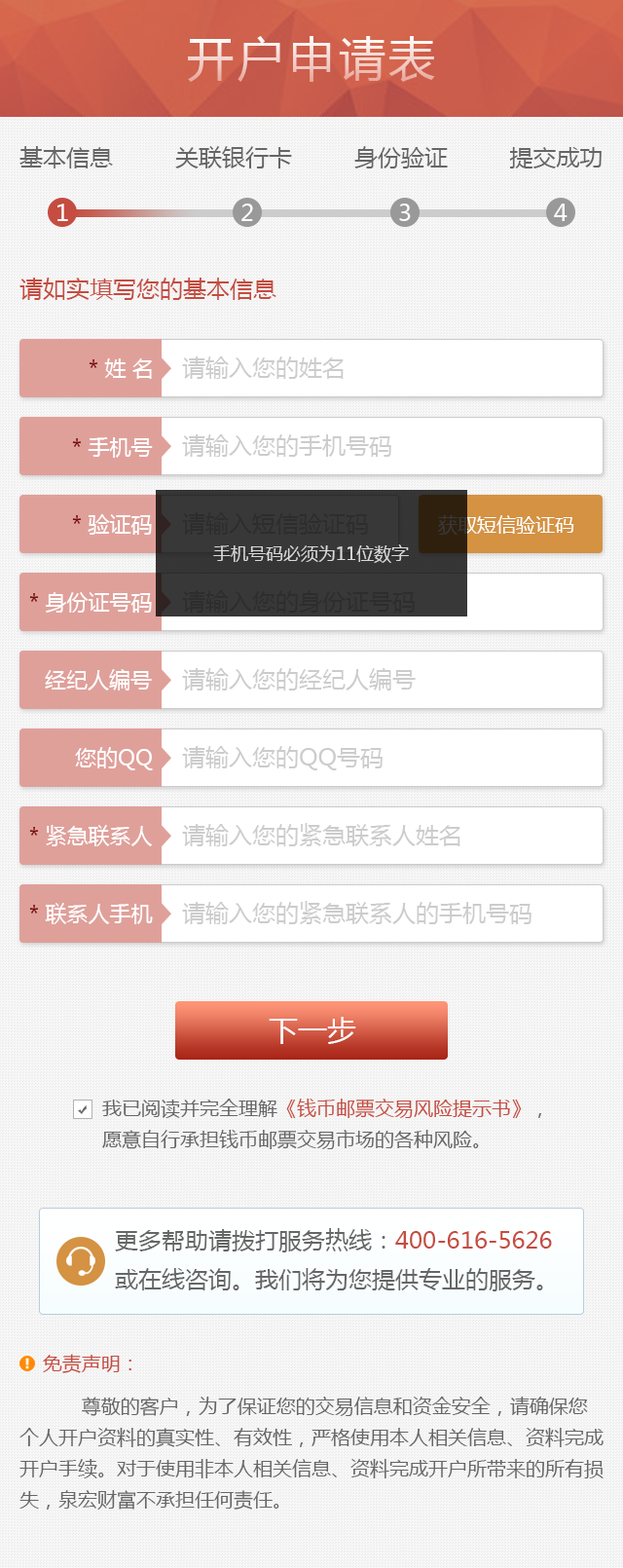
<style>
.page{position:relative;width:623px;height:1568px}
.page>*{position:absolute;margin:0}
.t1{font:46.7px "MicrosoftYaHei";letter-spacing:0.08em}
.t2{font:23.4px "MicrosoftYaHei";color:#666666}
.t3{font:23.4px "MicrosoftYaHei";letter-spacing:0.08em;color:#ffffff}
.t4{font:23.4px "MicrosoftYaHei";color:#c54c40}
.t5{font:21.4px "MicrosoftYaHei";color:#ffffff}
.t6{font:21.4px "MicrosoftYaHei";color:#7b0d0d}
.t7{font:23.4px "MicrosoftYaHei";color:#cccccc}
.t8{font:23.4px "MicrosoftYaHei";color:#2d2d2d}
.t9{font:19.5px "MicrosoftYaHei";color:#ffffff}
.t10{font:17.5px "MicrosoftYaHei";color:#d9d9d9}
.t11{font:29.2px "MicrosoftYaHei";color:#ffffff}
.t12{font:19.5px/31.2px "MicrosoftYaHei";color:#666666}
.t13{font:19.5px/31.2px "MicrosoftYaHei";color:#c54c40}
.t14{font:23.4px/39px "MicrosoftYaHei";color:#666666}
.t15{font:23.4px/39px "MicrosoftYaHei";color:#c54c40}
.t16{font:19.5px/42.9px "MicrosoftYaHei";color:#c54c40}
</style>
<div class="page">
<p class="t1" style="left:188px;top:36px;width:247px;height:46px">开户申请表</p>
<p class="t2" style="left:19px;top:146px;width:583px;height:22px">基本信息         关联银行卡         身份验证         提交成功</p>
<p class="t3" style="left:57px;top:204px;width:11px;height:17px">1</p>
<p class="t3" style="left:242px;top:204px;width:11px;height:17px">2</p>
<p class="t3" style="left:399px;top:204px;width:12px;height:17px">3</p>
<p class="t3" style="left:554px;top:204px;width:14px;height:17px">4</p>
<p class="t4" style="left:19px;top:278px;width:258px;height:22px">请如实填写您的基本信息</p>
<p class="t5" style="left:89px;top:358px;width:63px;height:21px"><span class="t6">* </span>姓 名</p>
<p class="t7" style="left:182px;top:356px;width:162px;height:23px">请输入您的姓名</p>
<p class="t5" style="left:72px;top:437px;width:81px;height:21px"><span class="t6">* </span>手机号</p>
<p class="t7" style="left:182px;top:434px;width:210px;height:23px">请输入您的手机号码</p>
<p class="t5" style="left:72px;top:514px;width:80px;height:21px"><span class="t6">* </span>验证码</p>
<p class="t8" style="left:182px;top:512px;width:186px;height:23px">请输入短信验证码</p>
<p class="t9" style="left:438px;top:515px;width:137px;height:20px">获取短信验证码</p>
<p class="t10" style="left:213px;top:544px;width:196px;height:19px">手机号码必须为11位数字</p>
<p class="t5" style="left:29px;top:592px;width:123px;height:21px"><span class="t6">* </span>身份证号码</p>
<p class="t8" style="left:182px;top:590px;width:233px;height:23px">请输入您的身份证号码</p>
<p class="t5" style="left:45px;top:669px;width:107px;height:22px">经纪人编号</p>
<p class="t7" style="left:182px;top:668px;width:234px;height:23px">请输入您的经纪人编号</p>
<p class="t5" style="left:75px;top:747px;width:78px;height:23px">您的QQ</p>
<p class="t7" style="left:182px;top:746px;width:201px;height:24px">请输入您的QQ号码</p>
<p class="t5" style="left:29px;top:825px;width:124px;height:21px"><span class="t6">* </span>紧急联系人</p>
<p class="t7" style="left:182px;top:823px;width:279px;height:23px">请输入您的紧急联系人姓名</p>
<p class="t5" style="left:29px;top:903px;width:124px;height:21px"><span class="t6">* </span>联系人手机</p>
<p class="t7" style="left:182px;top:901px;width:350px;height:23px">请输入您的紧急联系人的手机号码</p>
<p class="t11" style="left:269px;top:1017px;width:87px;height:27px">下一步</p>
<p class="t12" style="left:102px;top:1099px;width:439px;height:50px">我已阅读并完全理解<span class="t13">《钱币邮票交易风险提示书》</span>，愿意自行承担钱币邮票交易市场的各种风险。</p>
<p class="t14" style="left:115px;top:1228px;width:437px;height:63px">更多帮助请拨打服务热线：<span class="t15">400-616-5626</span>或在线咨询。我们将为您提供专业的服务。</p>
<p class="t12" style="left:19px;top:1354px;width:585px;height:156px"><span class="t13">    </span><span class="t16">免责声明：<br>　　    </span>尊敬的客户，为了保证您的交易信息和资金安全，请确保您个人开户资料的真实性、有效性，严格使用本人相关信息、资料完成开户手续。对于使用非本人相关信息、资料完成开户所带来的所有损失，泉宏财富不承担任何责任。</p>
</div>
